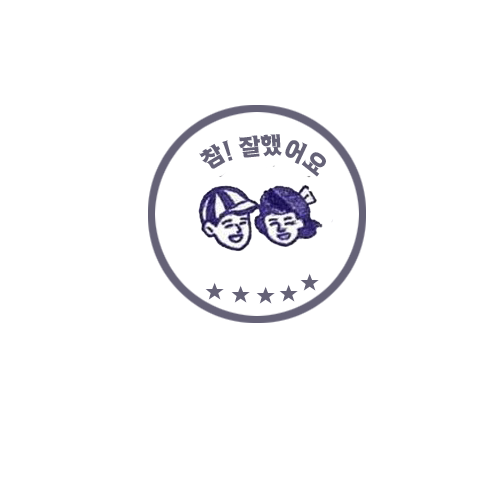
<style>
.page{position:relative;width:500px;height:500px;background:#ffffff}
.page>*{position:absolute;margin:0}
.t1{font:24px "SandEgB";color:#656277}
</style>
<div class="page">
<p class="t1" style="left:199px;top:134px;width:127px;height:43px">참! 잘했어요</p>
</div>
